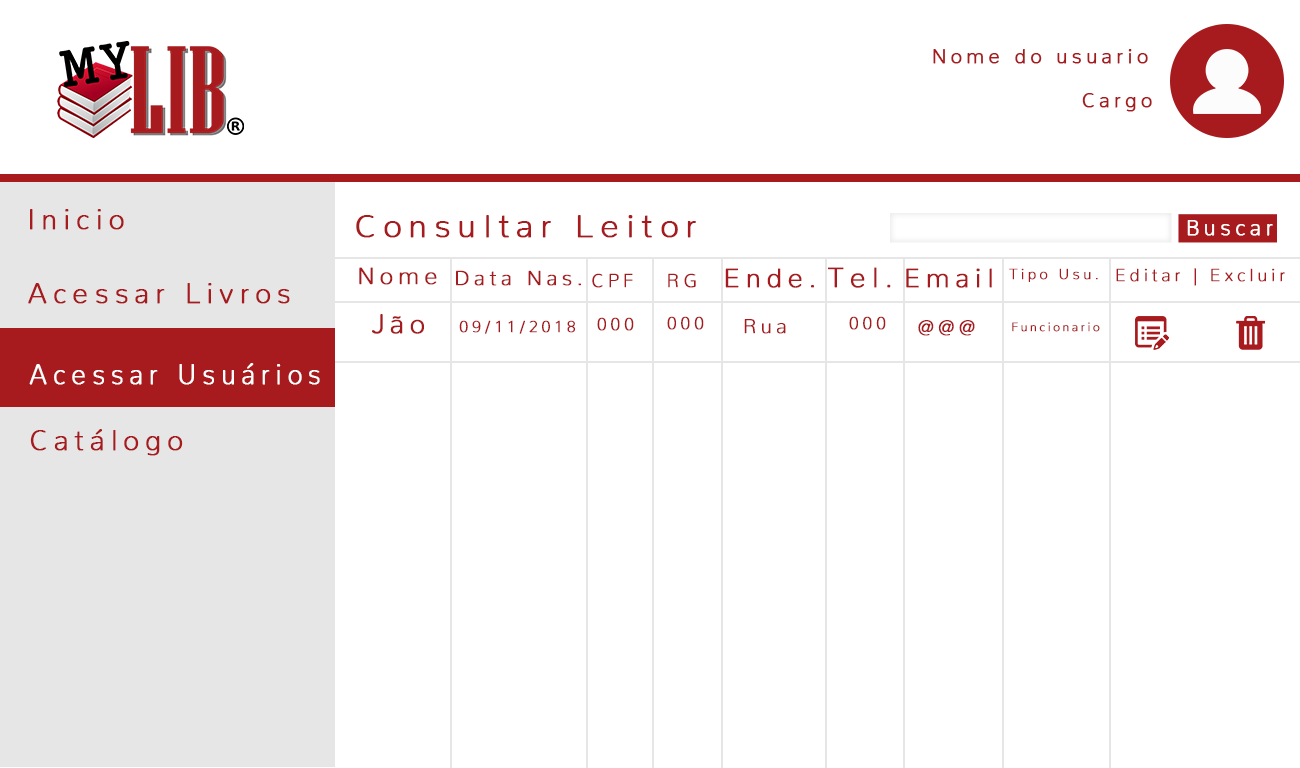
<style>
.page{position:relative;width:1300px;height:768px;background:#ffffff}
.page>*{position:absolute;margin:0}
.t1{font:20px "Nunito-ExtraLight";letter-spacing:0.2em;color:#a71b1e;font-weight:bold}
.t2{font:28px "Nunito-ExtraLight";letter-spacing:0.2em;color:#a71b1e;font-weight:bold}
.t3{font:32.7px "Nunito-ExtraLight";letter-spacing:0.2em;color:#a71b1e;font-weight:bold}
.t4{font:21.3px "Nunito-ExtraLight";letter-spacing:0.2em;color:#fdfdfd;font-weight:bold}
.t5{font:23.6px "Nunito-ExtraLight";letter-spacing:0.2em;color:#a71b1e;font-weight:bold}
.t6{font:20.8px "Nunito-ExtraLight";letter-spacing:0.2em;color:#a71b1e;font-weight:bold}
.t7{font:26.8px "Nunito-ExtraLight";letter-spacing:0.2em;color:#a71b1e;font-weight:bold}
.t8{font:28.1px "Nunito-ExtraLight";letter-spacing:0.2em;color:#a71b1e;font-weight:bold}
.t9{font:26.5px "Nunito-ExtraLight";letter-spacing:0.2em;color:#a71b1e;font-weight:bold}
.t10{font:14.8px "Nunito-ExtraLight";letter-spacing:0.2em;color:#a71b1e;font-weight:bold}
.t11{font:17.5px "Nunito-ExtraLight";letter-spacing:0.2em;color:#a71b1e;font-weight:bold}
.t12{font:19.1px "Nunito-ExtraLight";letter-spacing:0.2em;color:#a71b1e;font-weight:bold}
.t13{font:27px "Nunito-ExtraLight";letter-spacing:0.2em;color:#a71b1e;font-weight:bold}
.t14{font:16.3px "Nunito-ExtraLight";letter-spacing:0.2em;color:#a71b1e;font-weight:bold}
.t15{font:20.3px "Nunito-ExtraLight";letter-spacing:0.2em;color:#a71b1e;font-weight:bold}
.t16{font:20.1px "Nunito-ExtraLight";letter-spacing:0.2em;color:#a71b1e;font-weight:bold}
.t17{font:12px "Nunito-ExtraLight";letter-spacing:0.2em;color:#a71b1e;font-weight:bold}
.t18{font:28px "Nunito-ExtraLight";letter-spacing:0.2em;color:#ffffff;font-weight:bold;scale:0.94 1}
</style>
<div class="page">
<p class="t1" style="left:933px;top:49px;width:215px;height:15px">Nome do usuario</p>
<p class="t1" style="left:1082px;top:93px;width:70px;height:19px">Cargo</p>
<p class="t2" style="left:30px;top:209px;width:94px;height:21px">Inicio</p>
<p class="t3" style="left:356px;top:215px;width:340px;height:23px">Consultar Leitor</p>
<p class="t4" style="left:1187px;top:220px;width:86px;height:16px">Buscar</p>
<p class="t5" style="left:359px;top:267px;width:78px;height:18px">Nome</p>
<p class="t6" style="left:456px;top:270px;width:125px;height:16px">Data Nas.</p>
<p class="t7" style="left:725px;top:268px;width:89px;height:20px">Ende.</p>
<p class="t8" style="left:828px;top:267px;width:63px;height:21px">Tel.</p>
<p class="t9" style="left:906px;top:268px;width:86px;height:20px">Email</p>
<p class="t10" style="left:1009px;top:268px;width:89px;height:14px">Tipo Usu.</p>
<p class="t11" style="left:1116px;top:268px;width:169px;height:18px">Editar | Excluir</p>
<p class="t12" style="left:592px;top:273px;width:41px;height:15px">CPF</p>
<p class="t12" style="left:668px;top:273px;width:28px;height:15px">RG</p>
<p class="t2" style="left:28px;top:283px;width:262px;height:21px">Acessar Livros</p>
<p class="t13" style="left:372px;top:314px;width:52px;height:20px">Jão</p>
<p class="t11" style="left:597px;top:317px;width:37px;height:14px">000</p>
<p class="t11" style="left:667px;top:316px;width:37px;height:14px">000</p>
<p class="t11" style="left:849px;top:316px;width:37px;height:14px">000</p>
<p class="t14" style="left:459px;top:320px;width:116px;height:14px">09/11/2018</p>
<p class="t15" style="left:744px;top:319px;width:42px;height:15px">Rua</p>
<p class="t16" style="left:918px;top:320px;width:57px;height:16px">@@@</p>
<p class="t17" style="left:1012px;top:322px;width:88px;height:10px">Funcionario</p>
<p class="t18" style="left:29px;top:363px;width:291px;height:22px">Acessar Usuários</p>
<p class="t2" style="left:30px;top:429px;width:153px;height:27px">Catálogo</p>
</div>
